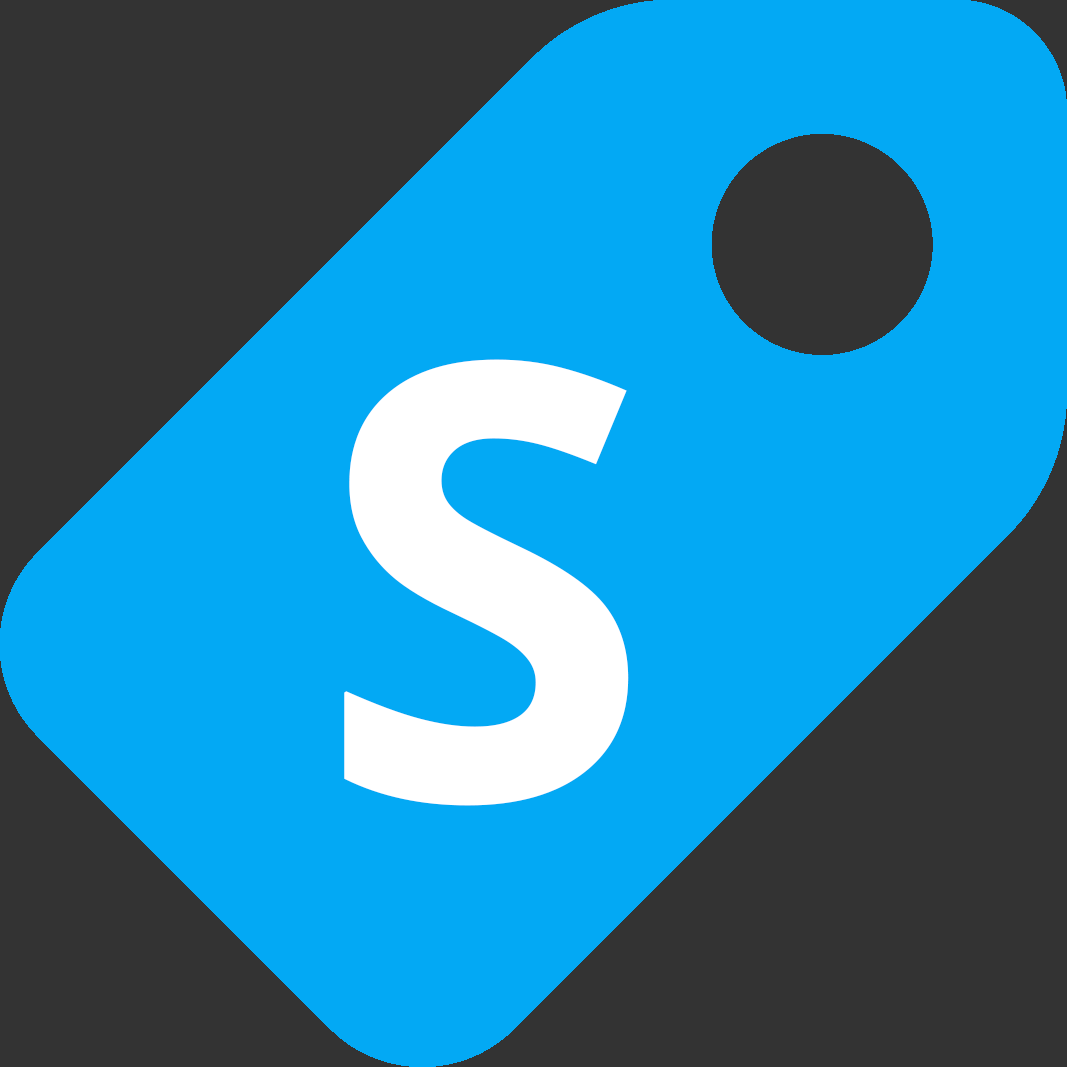
<style>
.page{position:relative;width:1067px;height:1067px;background:#03a9f4}
.page>*{position:absolute;margin:0}
.t1{font:604.4px "OpenSans-Bold";color:#ffffff;font-weight:bold}
</style>
<div class="page">
<p class="t1" style="left:344px;top:359px;width:285px;height:447px">S</p>
</div>
